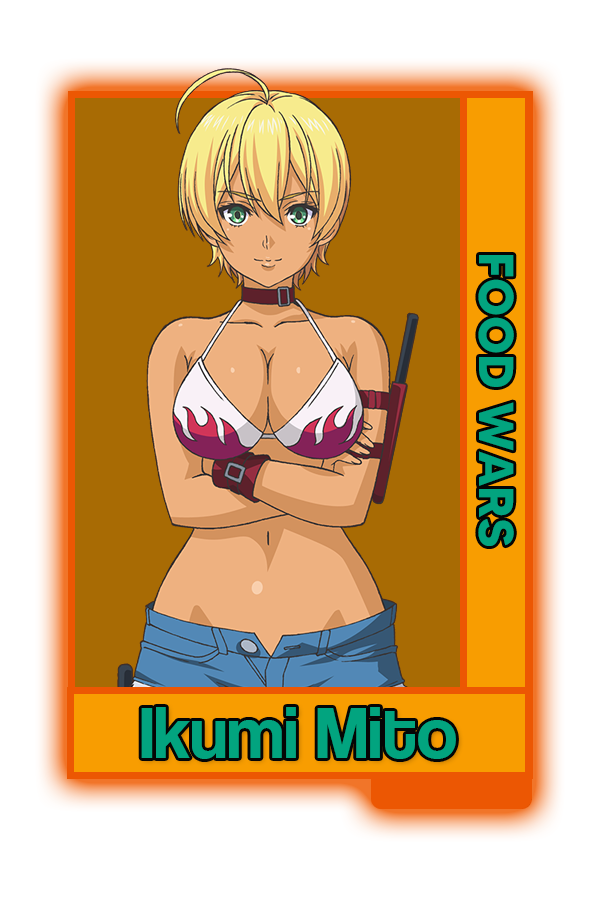
<style>
.page{position:relative;width:600px;height:900px;background:#ffffff}
.page>*{position:absolute;margin:0}
.t1{font:48.8px "MADETOMMY-Bold";color:#009f7b}
.t2{font:75px "CoolveticaRg-Regular";color:#009f7b}
</style>
<div class="page">
<p class="t1" style="left:478px;top:255px;width:36px;height:291px;rotate:90deg">FOOD WARS</p>
<p class="t2" style="left:141px;top:707px;width:315px;height:52px">Ikumi Mito</p>
</div>
